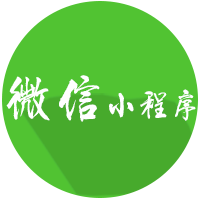
<style>
.page{position:relative;width:200px;height:200px;background:#51c332}
.page>*{position:absolute;margin:0}
.t1{font:31.6px "LiXuKe";letter-spacing:0.02em;color:#ffffff}
.t2{font:50.5px "LiXuKe";letter-spacing:0.02em;color:#ffffff}
</style>
<div class="page">
<p class="t1" style="left:6px;top:75px;width:190px;height:47px"><span class="t2">微信</span>小程序</p>
</div>
